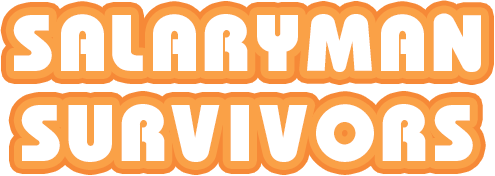
<style>
.page{position:relative;width:495px;height:176px;background:#ffffff}
.page>*{position:absolute;margin:0}
.t1{font:72px/89.5px "BauhausHeavy";letter-spacing:0.02em;color:#ffffff}
</style>
<div class="page">
<p class="t1" style="left:13px;top:13px;width:468px;height:149px;text-align:center">SALARYMAN<br>SURVIVORS</p>
</div>
